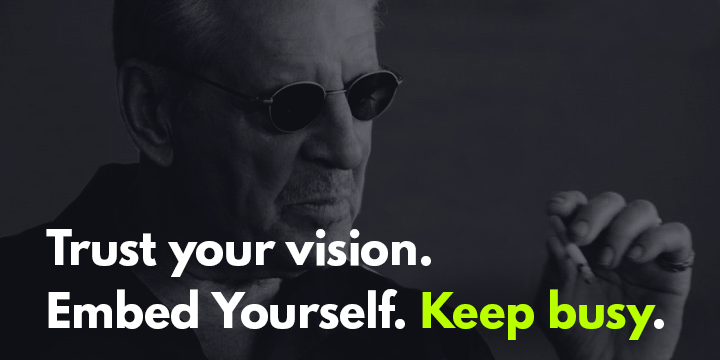
<style>
.page{position:relative;width:720px;height:360px}
.page>*{position:absolute;margin:0}
.t1{font:44px/63px "LeagueSpartan-Bold";color:#ffffff}
.t2{font:44px/63px "LeagueSpartan-Bold";color:#baff00}
</style>
<div class="page">
<p class="t1" style="left:46px;top:229px;width:618px;height:111px">Trust your vision.<br>Embed Yourself. <span class="t2">Keep busy</span>.</p>
</div>
